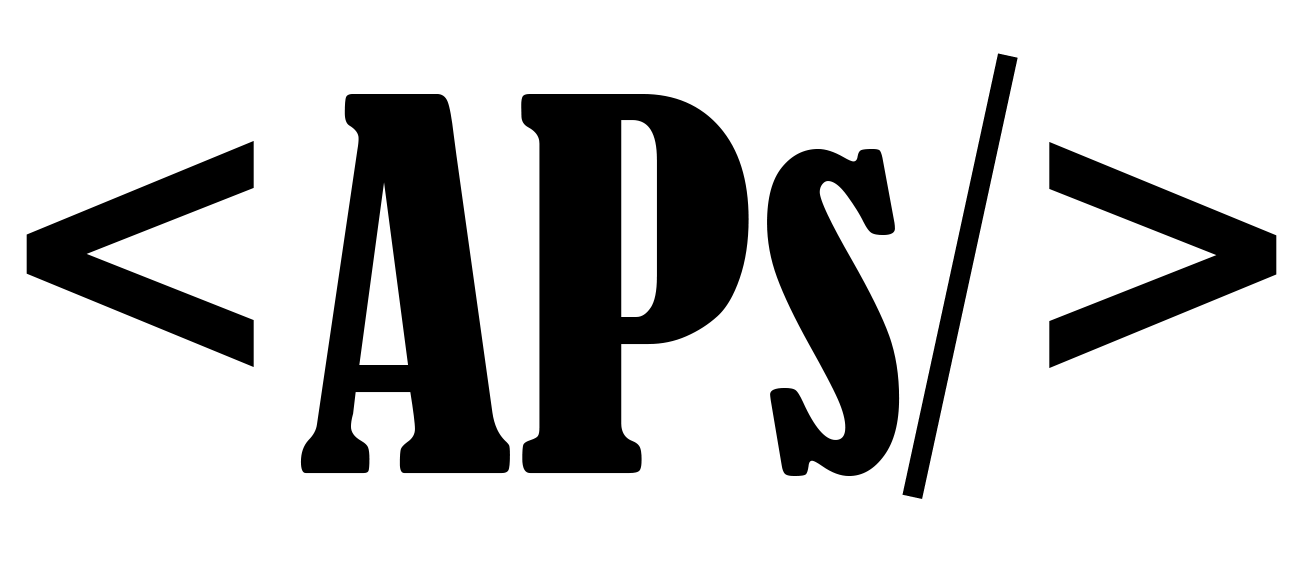
<style>
.page{position:relative;width:1303px;height:582px;background:#ffffff}
.page>*{position:absolute;margin:0}
.t1{font:481px "BernardMT-Condensed";color:#000000;scale:0.93 1}
.t2{font:411.6px "BernardMT-Condensed";color:#000000}
</style>
<div class="page">
<p class="t1" style="left:300px;top:94px;width:600px;height:382px">APs</p>
<p class="t2" style="left:26px;top:141px;width:228px;height:226px">&lt;</p>
<p class="t2" style="left:1049px;top:142px;width:228px;height:226px">&lt;</p>
</div>
